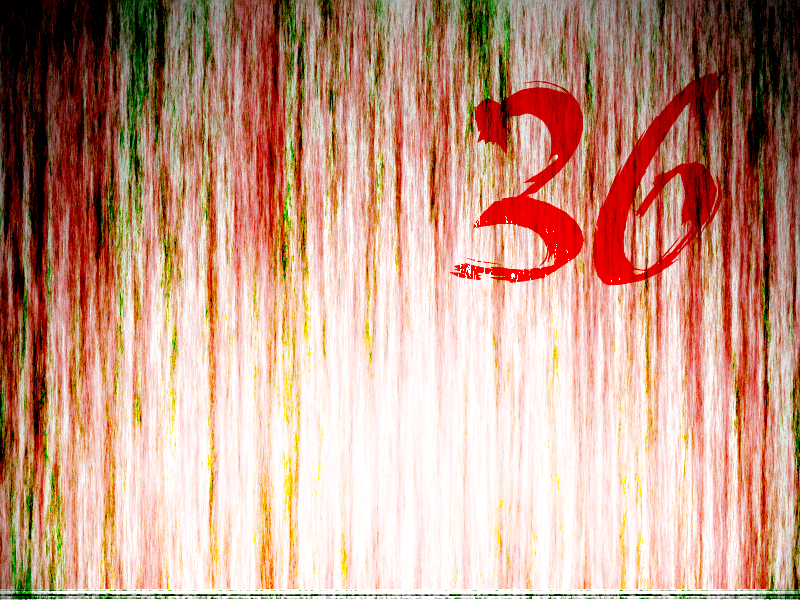
<style>
.page{position:relative;width:800px;height:600px}
.page>*{position:absolute;margin:0}
.t1{font:300px "RuachLetPlain"}
</style>
<div class="page">
<p class="t1" style="left:449px;top:70px;width:277px;height:216px">36</p>
</div>
